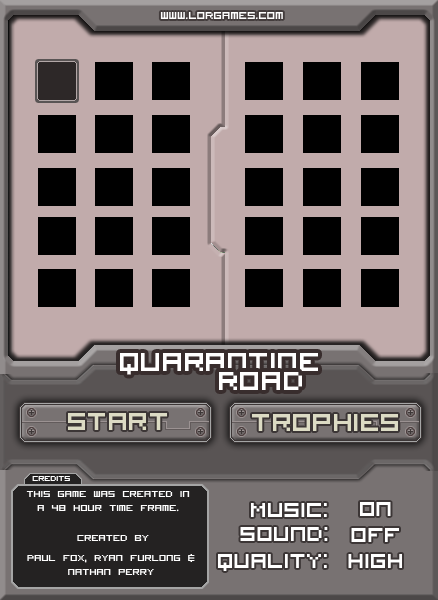
<style>
.page{position:relative;width:438px;height:600px;background:#c1abab}
.page>*{position:absolute;margin:0}
.t1{font:14px "VisitorTT1BRK";color:#ffffff}
.t2{font:10px "VisitorTT1BRK";color:#ffffff}
.t3{font:12px "VisitorTT1BRK";color:#ffffff}
.t4{font:27.9px "VisitorTT1BRK";color:#ffffff}
</style>
<div class="page">
<p class="t1" style="left:160px;top:12px;width:123px;height:8px">www.LORgames.com</p>
<p class="t2" style="left:32px;top:476px;width:38px;height:5px">Credits</p>
<p class="t3" style="left:26px;top:491px;width:164px;height:21px;text-align:center">This game was created in a 48 hour time frame.</p>
<p class="t4" style="left:251px;top:503px;width:76px;height:14px">Music:</p>
<p class="t4" style="left:360px;top:502px;width:31px;height:14px">On</p>
<p class="t4" style="left:240px;top:527px;width:88px;height:14px">Sound:</p>
<p class="t4" style="left:351px;top:528px;width:48px;height:14px">Off</p>
<p class="t3" style="left:77px;top:535px;width:72px;height:6px">Created by</p>
<p class="t3" style="left:27px;top:554px;width:168px;height:21px;text-align:center">Paul Fox, Ryan Furlong &amp; nathan perry</p>
<p class="t4" style="left:218px;top:554px;width:109px;height:17px">Quality:</p>
<p class="t4" style="left:348px;top:554px;width:54px;height:14px">High</p>
</div>
